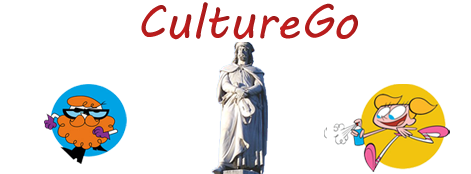
<style>
.page{position:relative;width:471px;height:174px;background:#ffffff}
.page>*{position:absolute;margin:0}
.t1{font:48px "MVBoli";color:#b51c1c}
</style>
<div class="page">
<p class="t1" style="left:141px;top:2px;width:217px;height:38px">CultureGo</p>
</div>
